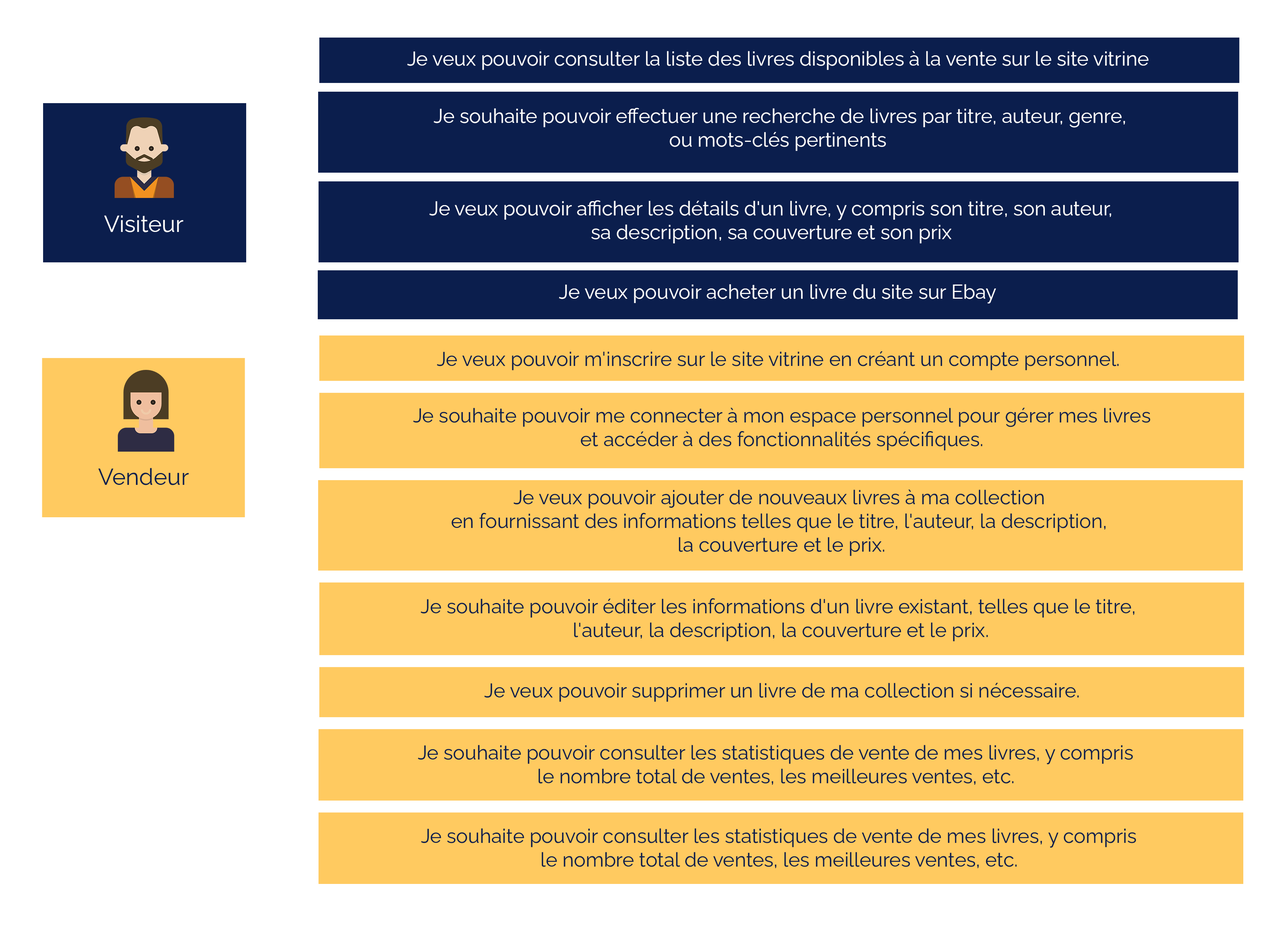
<style>
.page{position:relative;width:1284px;height:929px;background:#ffffff}
.page>*{position:absolute;margin:0}
.t1{font:19.8px "RalewayRoman-Regular";color:#ffffff}
.t2{font:23px "RalewayRoman-Regular";color:#ffffff}
.t3{font:19.8px "RalewayRoman-Regular";color:#0b1e4d}
.t4{font:23px "RalewayRoman-Regular";color:#0b1e4d}
</style>
<div class="page">
<p class="t1" style="left:407px;top:51px;width:741px;height:19px">Je veux pouvoir consulter la liste des livres disponibles à la vente sur le site vitrine</p>
<p class="t1" style="left:433px;top:108px;width:692px;height:43px;text-align:center">Je souhaite pouvoir effectuer une recherche de livres par titre, auteur, genre,<br>ou mots-clés pertinents</p>
<p class="t1" style="left:429px;top:200px;width:682px;height:43px;text-align:center">Je veux pouvoir afficher les détails d'un livre, y compris son titre, son auteur,<br> sa description, sa couverture et son prix</p>
<p class="t2" style="left:104px;top:215px;width:79px;height:17px">Visiteur</p>
<p class="t1" style="left:559px;top:284px;width:437px;height:19px">Je veux pouvoir acheter un livre du site sur Ebay</p>
<p class="t3" style="left:437px;top:351px;width:682px;height:19px">Je veux pouvoir m'inscrire sur le site vitrine en créant un compte personnel.</p>
<p class="t3" style="left:413px;top:408px;width:737px;height:42px;text-align:center">Je souhaite pouvoir me connecter à mon espace personnel pour gérer mes livres<br>et accéder à des fonctionnalités spécifiques.</p>
<p class="t4" style="left:98px;top:468px;width:91px;height:17px">Vendeur</p>
<p class="t3" style="left:451px;top:490px;width:655px;height:66px;text-align:center">Je veux pouvoir ajouter de nouveaux livres à ma collection<br>en fournissant des informations telles que le titre, l'auteur, la description,<br> la couverture et le prix.</p>
<p class="t3" style="left:420px;top:598px;width:714px;height:43px;text-align:center">Je souhaite pouvoir éditer les informations d'un livre existant, telles que le titre,<br> l'auteur, la description, la couverture et le prix.</p>
<p class="t3" style="left:484px;top:683px;width:595px;height:19px">Je veux pouvoir supprimer un livre de ma collection si nécessaire.</p>
<p class="t3" style="left:418px;top:745px;width:715px;height:40px;text-align:center">Je souhaite pouvoir consulter les statistiques de vente de mes livres, y compris <br>le nombre total de ventes, les meilleures ventes, etc.</p>
<p class="t3" style="left:421px;top:828px;width:715px;height:40px;text-align:center">Je souhaite pouvoir consulter les statistiques de vente de mes livres, y compris <br>le nombre total de ventes, les meilleures ventes, etc.</p>
</div>
